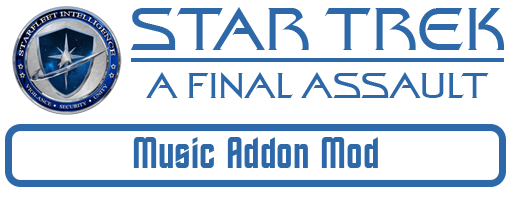
<style>
.page{position:relative;width:512px;height:200px;background:#ffffff}
.page>*{position:absolute;margin:0}
.t1{font:60px "StarTrekFilmBT-Regular";color:#2d68a9}
.t2{font:36px "StarTrekFilmBT-Regular";color:#2d68a9}
.t3{font:44px "StarTrekBT-Regular";color:#2d68a9}
</style>
<div class="page">
<p class="t1" style="left:131px;top:7px;width:373px;height:43px">STAR TREK</p>
<p class="t2" style="left:146px;top:72px;width:343px;height:27px">A FINAL ASSAULT</p>
<p class="t3" style="left:133px;top:137px;width:245px;height:31px">Music Addon Mod</p>
</div>
